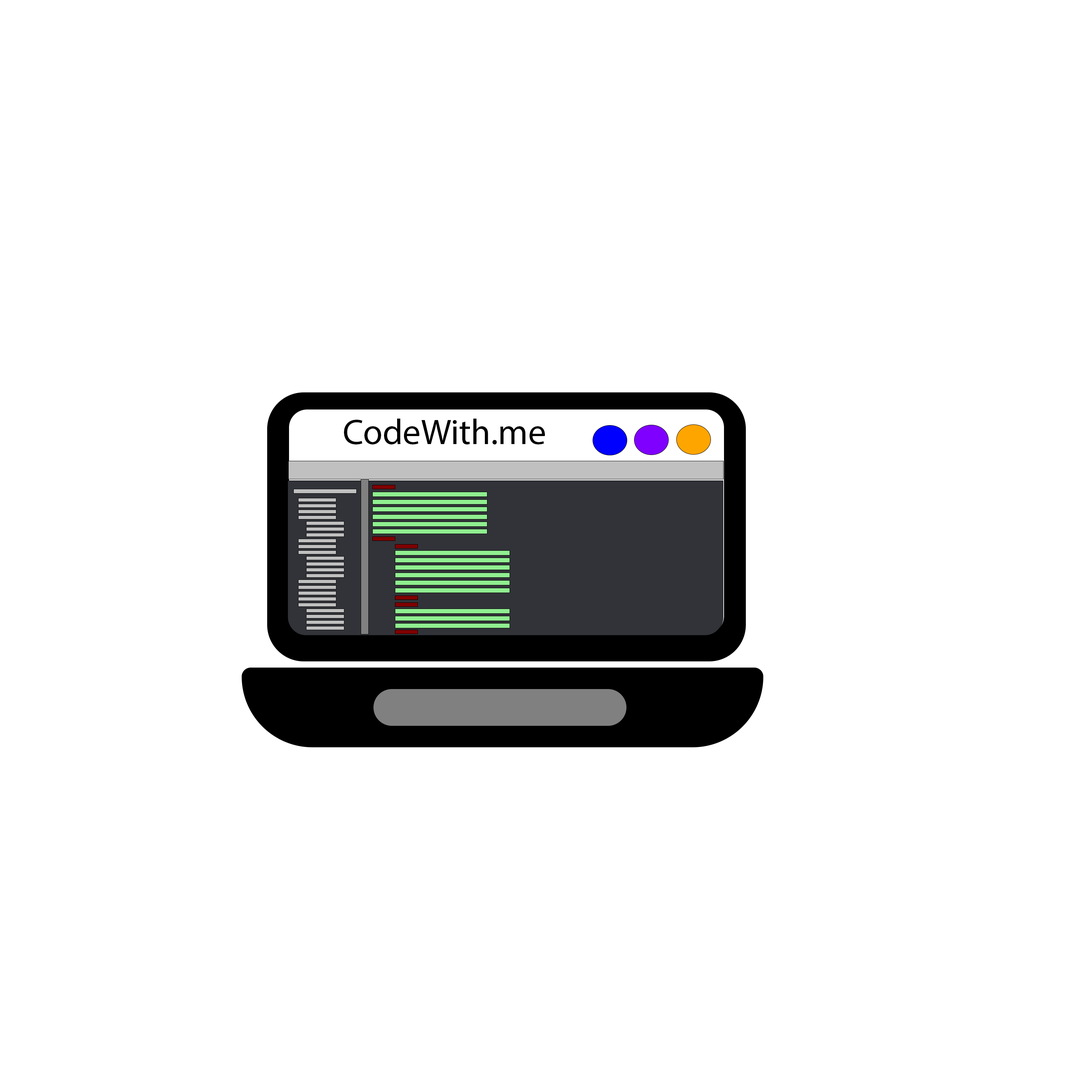
<style>
.page{position:relative;width:1092px;height:1092px;background:#ffffff}
.page>*{position:absolute;margin:0}
.t1{font:35.9px "MyriadPro-Regular";color:#000000}
</style>
<div class="page">
<p class="t1" style="left:344px;top:419px;width:201px;height:25px">CodeWith.me</p>
</div>
